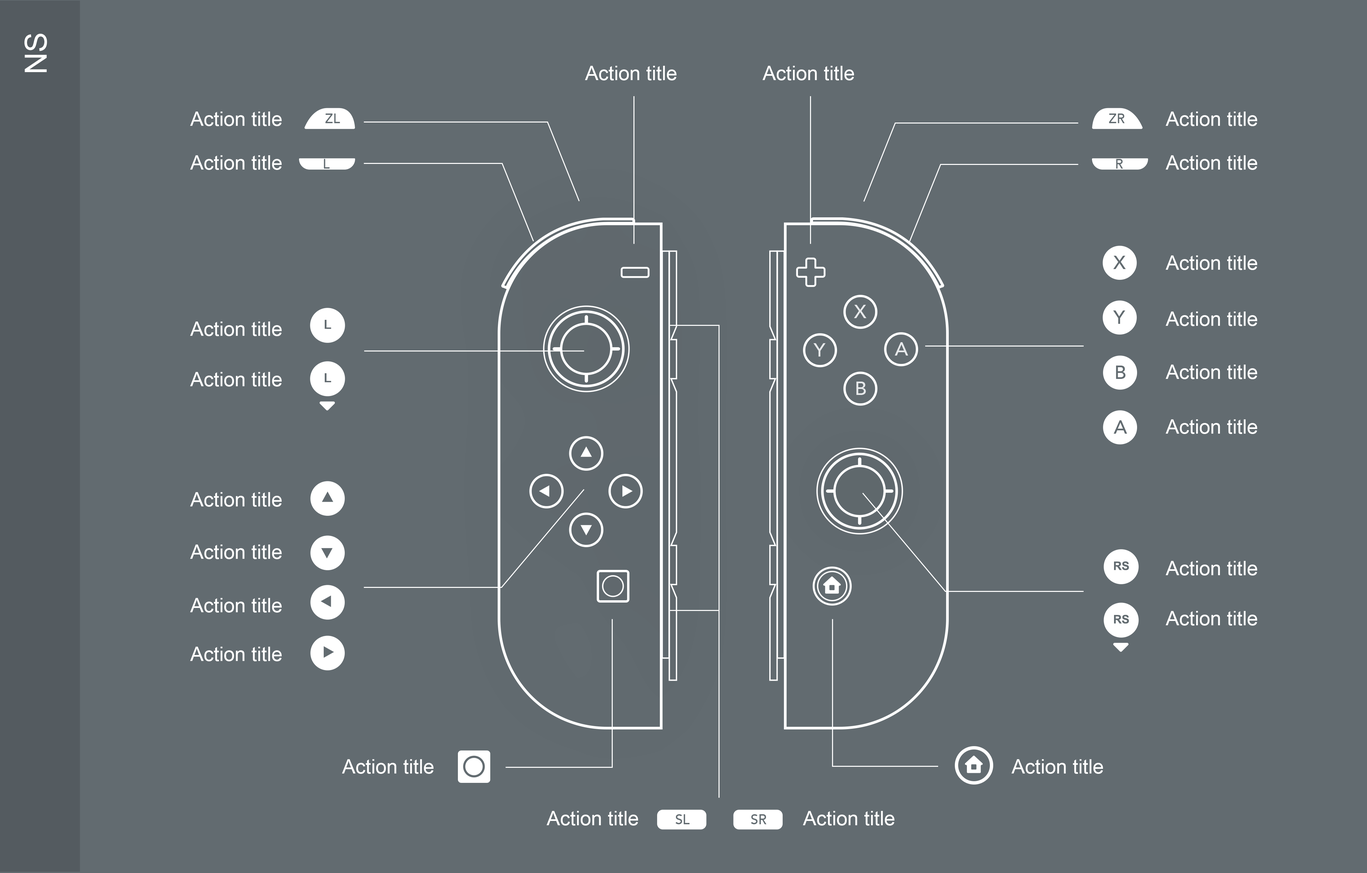
<style>
.page{position:relative;width:1367px;height:873px;background:#626b70}
.page>*{position:absolute;margin:0}
.t1{font:30.5px "ArialMT";color:#ffffff}
.t2{font:20px "ArialMT";color:#ffffff}
.t3{font:18.9px "Avenir-Medium";color:#e7e9eb}
</style>
<div class="page">
<p class="t1" style="left:24px;top:34px;width:23px;height:38px;rotate:-90deg">NS</p>
<p class="t2" style="left:585px;top:66px;width:91px;height:14px">Action title</p>
<p class="t2" style="left:762px;top:66px;width:92px;height:14px">Action title</p>
<p class="t2" style="left:190px;top:111px;width:92px;height:15px">Action title</p>
<p class="t2" style="left:1165px;top:111px;width:92px;height:15px">Action title</p>
<p class="t2" style="left:190px;top:155px;width:92px;height:15px">Action title</p>
<p class="t2" style="left:1165px;top:155px;width:92px;height:15px">Action title</p>
<p class="t2" style="left:1165px;top:255px;width:92px;height:15px">Action title</p>
<p class="t3" style="left:853px;top:305px;width:13px;height:13px">X</p>
<p class="t2" style="left:1165px;top:311px;width:92px;height:15px">Action title</p>
<p class="t2" style="left:190px;top:321px;width:92px;height:15px">Action title</p>
<p class="t3" style="left:895px;top:342px;width:13px;height:13px">A</p>
<p class="t3" style="left:813px;top:343px;width:12px;height:13px">Y</p>
<p class="t2" style="left:1165px;top:364px;width:92px;height:15px">Action title</p>
<p class="t2" style="left:190px;top:372px;width:92px;height:14px">Action title</p>
<p class="t3" style="left:856px;top:381px;width:10px;height:14px">B</p>
<p class="t2" style="left:1165px;top:419px;width:92px;height:15px">Action title</p>
<p class="t2" style="left:190px;top:492px;width:92px;height:14px">Action title</p>
<p class="t2" style="left:190px;top:544px;width:92px;height:15px">Action title</p>
<p class="t2" style="left:1165px;top:561px;width:92px;height:14px">Action title</p>
<p class="t2" style="left:190px;top:598px;width:92px;height:14px">Action title</p>
<p class="t2" style="left:1165px;top:611px;width:92px;height:14px">Action title</p>
<p class="t2" style="left:190px;top:646px;width:92px;height:15px">Action title</p>
<p class="t2" style="left:342px;top:759px;width:91px;height:14px">Action title</p>
<p class="t2" style="left:1011px;top:759px;width:92px;height:14px">Action title</p>
<p class="t2" style="left:546px;top:810px;width:92px;height:15px">Action title</p>
<p class="t2" style="left:802px;top:810px;width:92px;height:15px">Action title</p>
</div>
